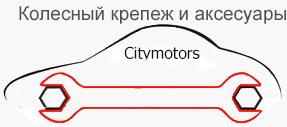
<style>
.page{position:relative;width:287px;height:127px;background:#f8f8f8}
.page>*{position:absolute;margin:0}
.t1{font:19px "ArialMT";color:#4f4f4f}
</style>
<div class="page">
<p class="t1" style="left:19px;top:6px;width:267px;height:18px">Колесный крепеж и аксесуары</p>
</div>
